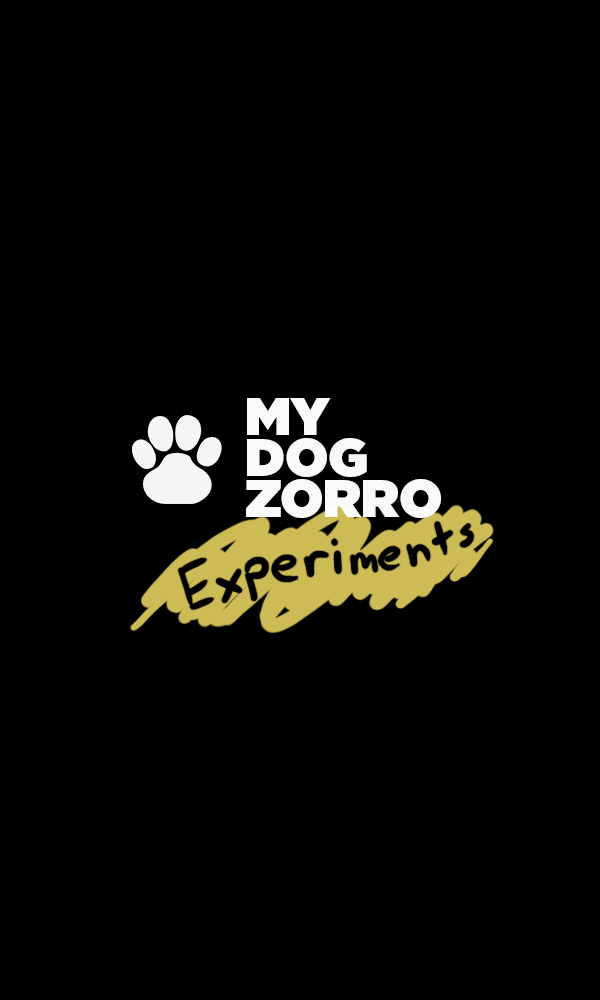
<style>
.page{position:relative;width:600px;height:1000px;background:#000000}
.page>*{position:absolute;margin:0}
.t1{font:52.8px "GothamUltra";color:#ffffff}
</style>
<div class="page">
<p class="t1" style="left:246px;top:398px;width:195px;height:120px;opacity:0.96">MY<br>DOG<br>ZORRO</p>
</div>
